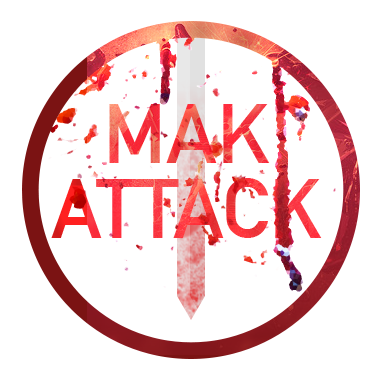
<style>
.page{position:relative;width:385px;height:385px;background:#ffffff}
.page>*{position:absolute;margin:0}
.t1{font:83.3px/75px "DINAlternate-Bold"}
</style>
<div class="page">
<p class="t1" style="left:51px;top:104px;width:271px;height:134px;text-align:center">MAK<br>ATTACK</p>
</div>
